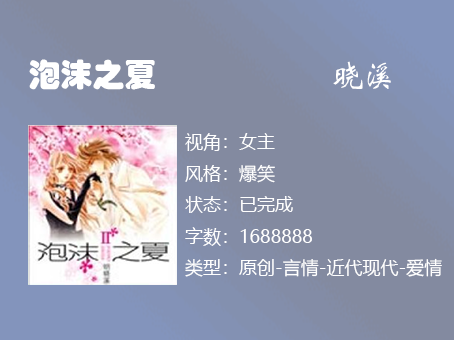
<style>
.page{position:relative;width:454px;height:340px;background:#838aa0}
.page>*{position:absolute;margin:0}
.t1{font:32px "STHupo";color:#ffffff}
.t2{font:32px "STXinwei";color:#ffffff}
.t3{font:18px "MicrosoftYaHei";color:#ffffff}
</style>
<div class="page">
<p class="t1" style="left:29px;top:59px;width:126px;height:31px">泡沫之夏</p>
<p class="t2" style="left:333px;top:61px;width:58px;height:28px">晓溪</p>
<p class="t3" style="left:185px;top:133px;width:257px;height:144px">视角：女主<br>风格：爆笑<br>状态：已完成<br>字数：1688888<br>类型：原创-言情-近代现代-爱情</p>
</div>
